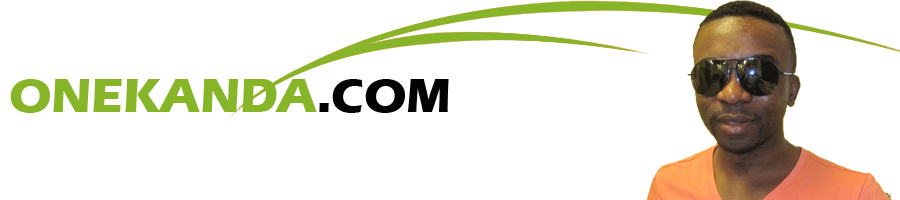
<style>
.page{position:relative;width:900px;height:200px;background:#ffffff}
.page>*{position:absolute;margin:0}
.t1{font:48.6px "ErasITC-Bold";color:#87b528}
.t2{font:48.6px "ErasITC-Bold";color:#030303}
</style>
<div class="page">
<p class="t1" style="left:10px;top:79px;width:439px;height:34px">ONEKANDA<span class="t2">.COM</span></p>
</div>
